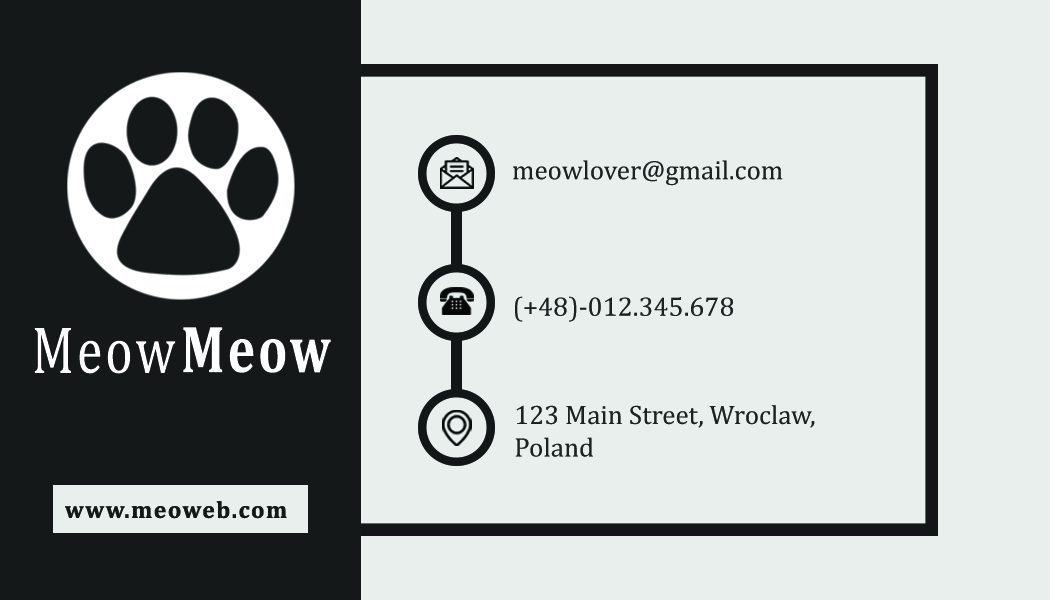
<style>
.page{position:relative;width:1050px;height:600px;background:#e8efed}
.page>*{position:absolute;margin:0}
.t1{font:27.1px "Cambria";color:#1c2122}
.t2{font:67.1px "Cambria";letter-spacing:0.06em;color:#ffffff;scale:0.77 1}
.t3{font:67.1px "Cambria-Bold";letter-spacing:0.06em;color:#feffff;scale:0.77 1}
.t4{font:23.8px "Cambria-Bold";letter-spacing:0.06em;color:#141819}
</style>
<div class="page">
<p class="t1" style="left:513px;top:160px;width:270px;height:26px">meowlover@gmail.com</p>
<p class="t1" style="left:515px;top:296px;width:218px;height:26px">(+48)-012.345.678</p>
<p class="t2" style="left:34px;top:328px;width:142px;height:46px">Meow</p>
<p class="t3" style="left:183px;top:327px;width:148px;height:46px">Meow</p>
<p class="t1" style="left:515px;top:405px;width:300px;height:52px">123 Main Street, Wroclaw,<br>Poland</p>
<p class="t4" style="left:65px;top:501px;width:222px;height:18px">www.meoweb.com</p>
</div>
